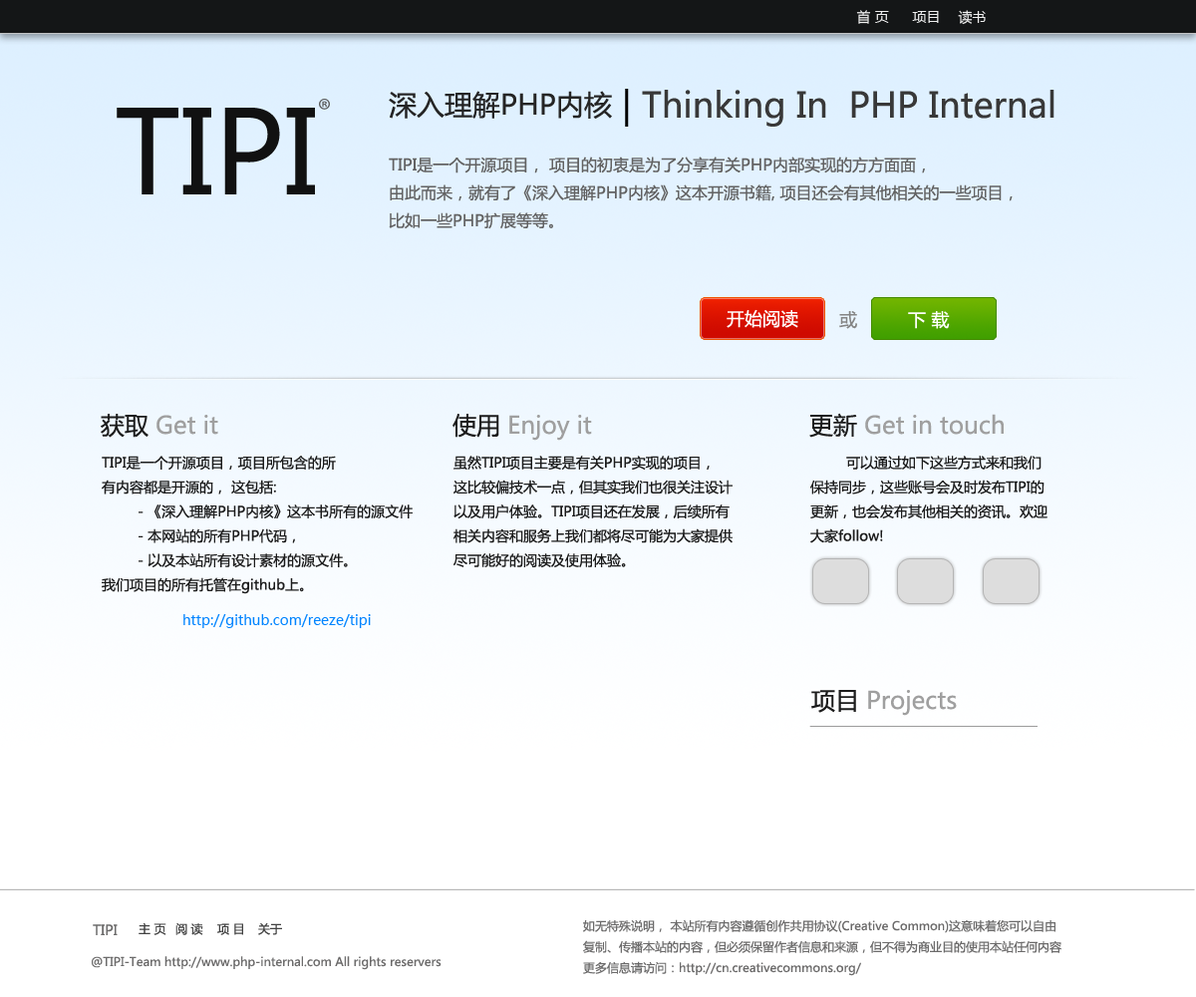
<style>
.page{position:relative;width:1196px;height:997px;background:#ffffff}
.page>*{position:absolute;margin:0}
.t1{font:14px "MicrosoftYaHei";color:#eeeeee}
.t2{font:34.9px "MicrosoftYaHei";color:#383838}
.t3{font:34.9px "MicrosoftYaHei";color:#000000}
.t4{font:27.9px "MicrosoftYaHei";color:#252525}
.t5{font:114.6px "MicrosoftYaHei";color:#111111}
.t6{font:15.9px "MicrosoftYaHei";color:#626262}
.t7{font:17.9px "MicrosoftYaHei";color:#ffffff}
.t8{font:17.9px "MicrosoftYaHei";color:#848484}
.t9{font:23.9px "MicrosoftYaHei";color:#9f9f9f}
.t10{font:23.9px "MicrosoftYaHei";color:#1c1c1c}
.t11{font:14px "MicrosoftYaHei";color:#1c1c1c}
.t12{font:14px "MicrosoftYaHei";color:#0084ff}
.t13{font:14px "MicrosoftYaHei";color:#6c6b6b}
.t14{font:12px "MicrosoftYaHei";color:#424242}
.t15{font:12px "MicrosoftYaHei";color:#6c6b6b}
</style>
<div class="page">
<p class="t1" style="left:856px;top:10px;width:33px;height:14px">首 页</p>
<p class="t1" style="left:912px;top:11px;width:27px;height:12px">项目</p>
<p class="t1" style="left:958px;top:10px;width:28px;height:15px">读书</p>
<p class="t2" style="left:625px;top:89px;width:430px;height:38px"><span class="t3">| </span>Thinking In  PHP Internal</p>
<p class="t4" style="left:389px;top:91px;width:223px;height:28px">深入理解PHP内核</p>
<p class="t5" style="left:117px;top:108px;width:198px;height:86px">TIPI</p>
<p class="t6" style="left:389px;top:157px;width:624px;height:72px">TIPI是一个开源项目， 项目的初衷是为了分享有关PHP内部实现的方方面面，<br>由此而来，就有了《深入理解PHP内核》这本开源书籍, 项目还会有其他相关的一些项目，<br>比如一些PHP扩展等等。</p>
<p class="t7" style="left:727px;top:309px;width:71px;height:19px">开始阅读</p>
<p class="t8" style="left:839px;top:311px;width:18px;height:18px">或</p>
<p class="t7" style="left:908px;top:311px;width:42px;height:18px">下 载</p>
<p class="t9" style="left:101px;top:414px;width:117px;height:24px"><span class="t10">获取</span> Get it</p>
<p class="t9" style="left:453px;top:414px;width:139px;height:27px"><span class="t10">使用</span> Enjoy it</p>
<p class="t9" style="left:809px;top:413px;width:195px;height:25px"><span class="t10">更新</span> Get in touch</p>
<p class="t11" style="left:102px;top:456px;width:311px;height:138px">TIPI是一个开源项目，项目所包含的所<br>有内容都是开源的， 这包括: <br> - 《深入理解PHP内核》这本书所有的源文件<br> - 本网站的所有PHP代码， <br> - 以及本站所有设计素材的源文件。<br>我们项目的所有托管在github上。</p>
<p class="t11" style="left:454px;top:456px;width:279px;height:111px">虽然TIPI项目主要是有关PHP实现的项目，<br>这比较偏技术一点，但其实我们也很关注设计<br>以及用户体验。TIPI项目还在发展，后续所有<br>相关内容和服务上我们都将尽可能为大家提供<br>尽可能好的阅读及使用体验。</p>
<p class="t11" style="left:810px;top:456px;width:238px;height:87px">可以通过如下这些方式来和我们<br>保持同步，这些账号会及时发布TIPI的<br>更新，也会发布其他相关的资讯。欢迎<br>大家follow!</p>
<p class="t12" style="left:183px;top:614px;width:188px;height:14px">http://github.com/reeze/tipi</p>
<p class="t9" style="left:811px;top:690px;width:146px;height:26px"><span class="t10">项目 </span>Projects</p>
<p class="t13" style="left:93px;top:924px;width:25px;height:11px">TIPI</p>
<p class="t14" style="left:139px;top:922px;width:27px;height:13px">主 页</p>
<p class="t14" style="left:175px;top:923px;width:28px;height:12px">阅 读</p>
<p class="t14" style="left:217px;top:923px;width:26px;height:12px">项 目</p>
<p class="t14" style="left:258px;top:923px;width:24px;height:12px">关于</p>
<p class="t15" style="left:583px;top:919px;width:479px;height:57px">如无特殊说明， 本站所有内容遵循创作共用协议(Creative Common)这意味着您可以自由<br>复制、传播本站的内容，但必须保留作者信息和来源，但不得为商业目的使用本站任何内容<br>更多信息请访问：http://cn.creativecommons.org/</p>
<p class="t15" style="left:92px;top:956px;width:350px;height:14px">@TIPI-Team http://www.php-internal.com All rights reservers</p>
</div>
